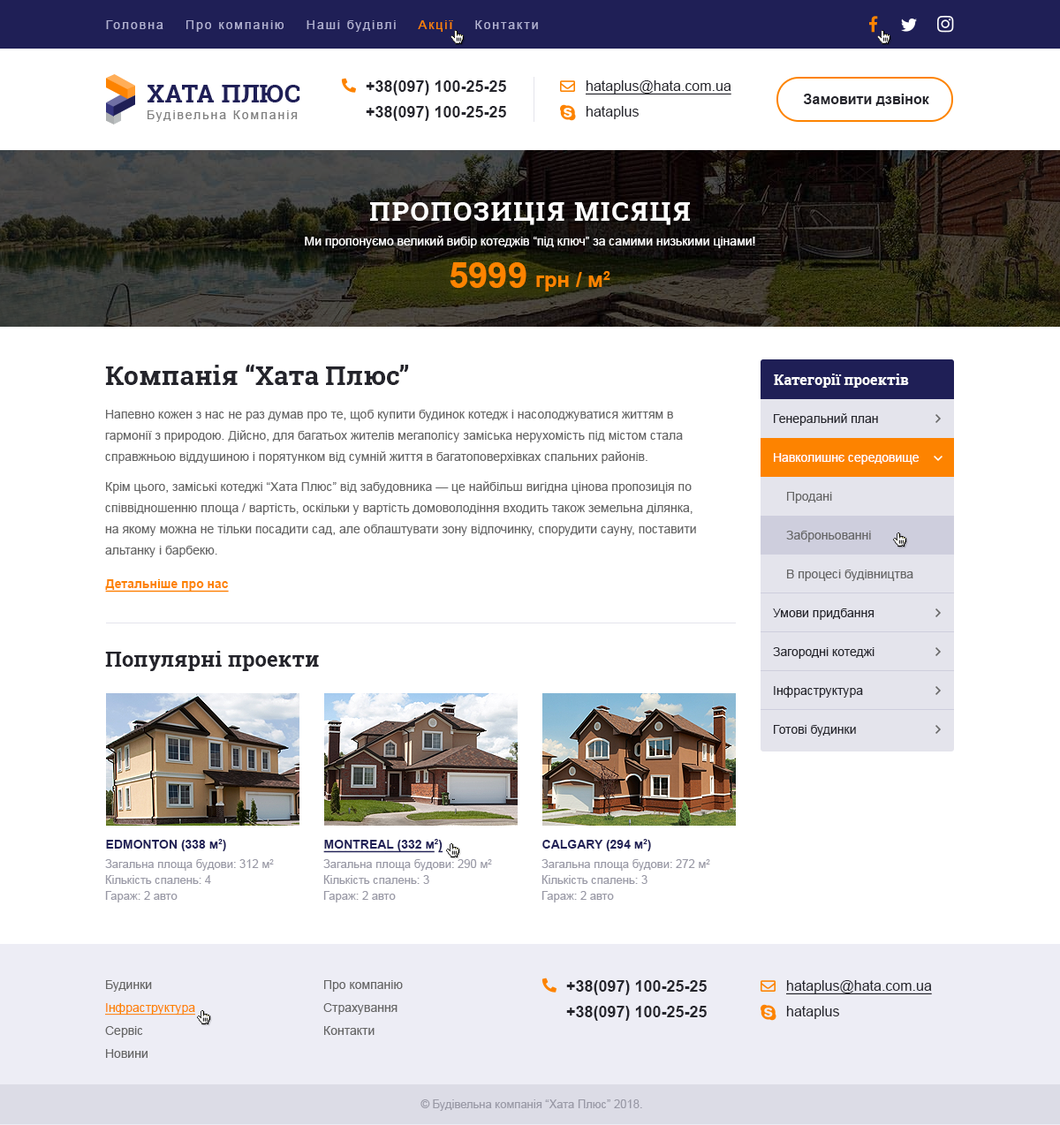
<style>
.page{position:relative;width:1060px;height:1125px;background:#ffffff}
.page>*{position:absolute;margin:0}
.t1{font:12.4px "ArialMT";letter-spacing:0.14em;color:#b1b1d2}
.t2{font:12.4px "ArialMT";letter-spacing:0.14em;color:#fd8300}
.t3{font:15.9px "Arial-BoldMT";color:#25252c}
.t4{font:14.1px "ArialMT";color:#25252c;text-decoration:underline}
.t5{font:14.1px "Arial-BoldMT";color:#25252c}
.t6{font:14.1px "ArialMT";color:#25252c}
.t7{font:26.5px "RobotoSlab-Bold";letter-spacing:0.06em;color:#ffffff;text-transform:uppercase}
.t8{font:12.4px "ArialMT";color:#ffffff}
.t9{font:35.3px "Arial-BoldMT";color:#fd8300}
.t10{font:21.2px "Arial-BoldMT";color:#fd8300}
.t11{font:26.5px "RobotoSlab-Bold";color:#24242b}
.t12{font:14.1px "RobotoSlab-Bold";color:#ffffff}
.t13{font:12.4px/21.2px "ArialMT";color:#666666}
.t14{font:12.4px "ArialMT";color:#25252c}
.t15{font:12.4px "ArialMT";color:#666666}
.t16{font:12.4px "Arial-BoldMT";color:#fd8300;text-decoration:underline}
.t17{font:21.2px "RobotoSlab-Bold";color:#24242b}
.t18{font:12.4px "Arial-BoldMT";color:#1f1f56}
.t19{font:12.4px "Arial-BoldMT";color:#1f1f56;text-decoration:underline}
.t20{font:11.5px/15.9px "ArialMT";color:#9999a6}
.t21{font:12.4px/23px "ArialMT";color:#fd8300;text-decoration:underline}
.t22{font:12.4px/23px "ArialMT";color:#666666}
.t23{font:11.5px "ArialMT";color:#9999a6}
</style>
<div class="page">
<p class="t1" style="left:106px;top:20px;width:432px;height:12px">Головна    Про компанію    Наші будівлі    <span class="t2">Акції</span>    Контакти</p>
<p class="t3" style="left:366px;top:80px;width:140px;height:15px">+38(097) 100-25-25</p>
<p class="t4" style="left:586px;top:80px;width:145px;height:15px">hataplus@hata.com.ua</p>
<p class="t5" style="left:803px;top:94px;width:126px;height:12px">Замовити дзвінок</p>
<p class="t3" style="left:366px;top:106px;width:140px;height:15px">+38(097) 100-25-25</p>
<p class="t6" style="left:586px;top:106px;width:53px;height:13px">hataplus</p>
<p class="t7" style="left:370px;top:202px;width:320px;height:23px">Пропозиція місяця</p>
<p class="t8" style="left:305px;top:236px;width:450px;height:12px">Ми пропонуємо великий вибір котеджів “під ключ” за самими низькими цінами!</p>
<p class="t9" style="left:450px;top:262px;width:76px;height:26px">5999</p>
<p class="t10" style="left:536px;top:271px;width:74px;height:20px">грн / м2</p>
<p class="t11" style="left:105px;top:364px;width:304px;height:21px">Компанія “Хата Плюс”</p>
<p class="t12" style="left:774px;top:374px;width:135px;height:14px">Категорії проектів</p>
<p class="t13" style="left:105px;top:410px;width:591px;height:147px">Напевно кожен з нас не раз думав про те, щоб купити будинок котедж і насолоджуватися життям в гармонії з природою. Дійсно, для багатьох жителів мегаполісу заміська нерухомість під містом стала справжньою віддушиною і порятунком від сумній життя в багатоповерхівках спальних районів. <br>Крім цього, заміські котеджі “Хата Плюс” від забудовника — це найбільш вигідна цінова пропозиція по співвідношенню площа / вартість, оскільки у вартість домоволодіння входить також земельна ділянка, на якому можна не тільки посадити сад, але облаштувати зону відпочинку, спорудити сауну, поставити альтанку і барбекю.</p>
<p class="t14" style="left:774px;top:413px;width:104px;height:13px">Генеральний план</p>
<p class="t8" style="left:774px;top:453px;width:145px;height:12px">Навколишнє середовище</p>
<p class="t15" style="left:787px;top:492px;width:45px;height:11px">Продані</p>
<p class="t15" style="left:786px;top:531px;width:85px;height:11px">Заброньованні</p>
<p class="t15" style="left:787px;top:570px;width:126px;height:11px">В процесі будівництва</p>
<p class="t16" style="left:105px;top:579px;width:124px;height:14px">Детальніше про нас</p>
<p class="t14" style="left:773px;top:609px;width:101px;height:11px">Умови придбання</p>
<p class="t17" style="left:105px;top:651px;width:214px;height:20px">Популярні проекти</p>
<p class="t14" style="left:773px;top:647px;width:101px;height:12px">Загородні котеджі</p>
<p class="t14" style="left:774px;top:686px;width:89px;height:12px">Інфраструктура</p>
<p class="t14" style="left:774px;top:725px;width:82px;height:12px">Готові будинки</p>
<p class="t18" style="left:106px;top:839px;width:120px;height:12px">EDMONTON (338 м2)</p>
<p class="t19" style="left:323px;top:839px;width:120px;height:14px">MONTREAL (332 м<span class="t18">2</span>)</p>
<p class="t18" style="left:542px;top:839px;width:109px;height:12px">CALGARY (294 м2)</p>
<p class="t20" style="left:105px;top:859px;width:169px;height:44px">Загальна площа будови: 312 м2<br>Кількість спалень: 4<br>Гараж: 2 авто</p>
<p class="t20" style="left:323px;top:859px;width:169px;height:44px">Загальна площа будови: 290 м2<br>Кількість спалень: 3<br>Гараж: 2 авто</p>
<p class="t20" style="left:541px;top:859px;width:169px;height:44px">Загальна площа будови: 272 м2<br>Кількість спалень: 3<br>Гараж: 2 авто</p>
<p class="t21" style="left:105px;top:980px;width:91px;height:78px"><span class="t22">Будинки<br></span>Інфраструктура<br><span class="t22">Сервіс<br>Новини</span></p>
<p class="t22" style="left:323px;top:980px;width:80px;height:55px">Про компанію<br>Страхування<br>Контакти</p>
<p class="t3" style="left:566px;top:980px;width:141px;height:15px">+38(097) 100-25-25</p>
<p class="t4" style="left:786px;top:980px;width:146px;height:15px">hataplus@hata.com.ua</p>
<p class="t3" style="left:566px;top:1006px;width:141px;height:15px">+38(097) 100-25-25</p>
<p class="t6" style="left:786px;top:1006px;width:53px;height:13px">hataplus</p>
<p class="t23" style="left:420px;top:1100px;width:222px;height:11px">© Будівельна компанія “Хата Плюс” 2018.</p>
</div>
